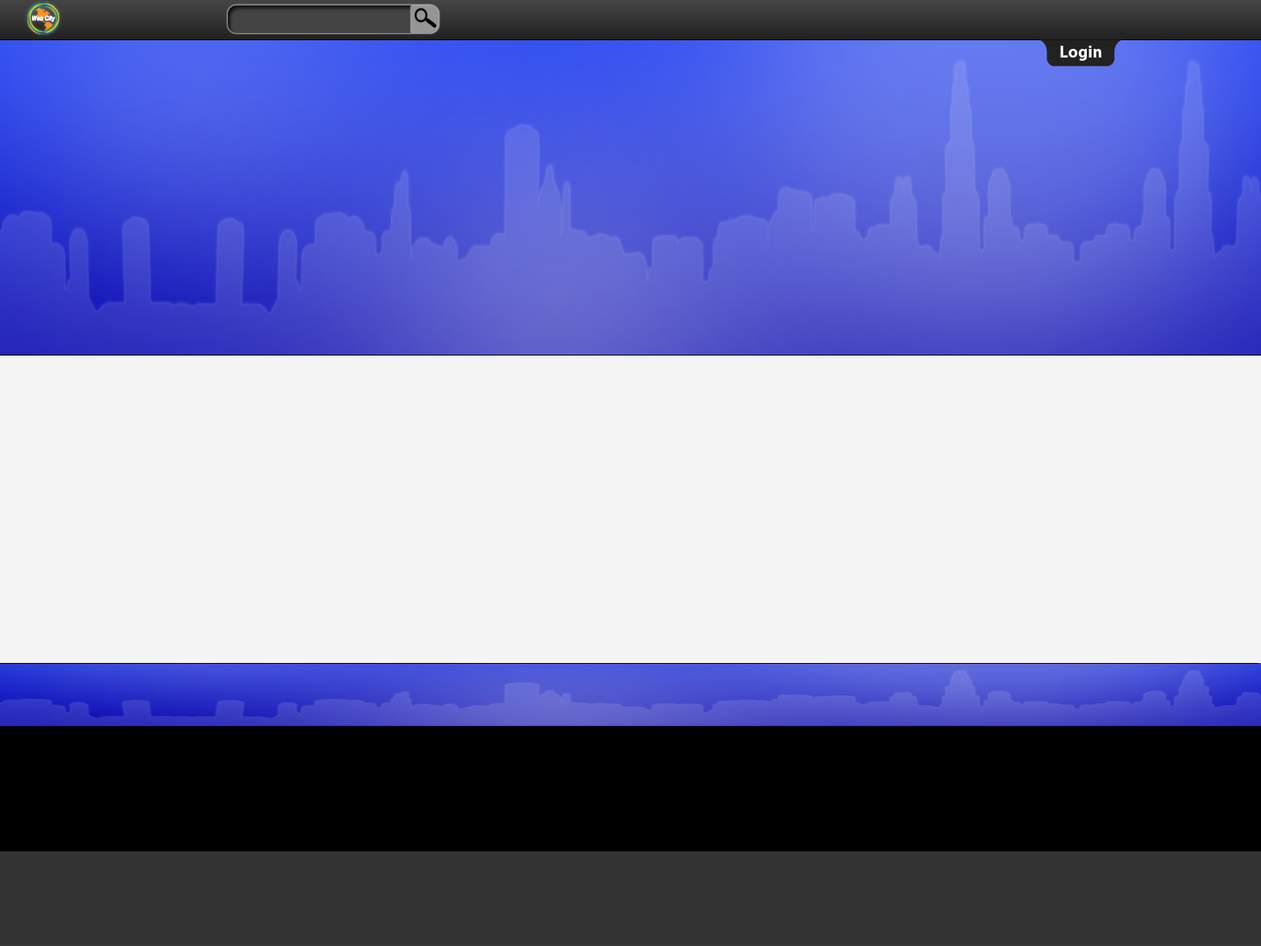
<style>
.page{position:relative;width:1261px;height:946px;background:#f4f4f4}
.page>*{position:absolute;margin:0}
.t1{font:17.1px "MyriadPro-Bold";color:#ffffff}
</style>
<div class="page">
<p class="t1" style="left:1060px;top:45px;width:42px;height:16px">Login</p>
</div>
